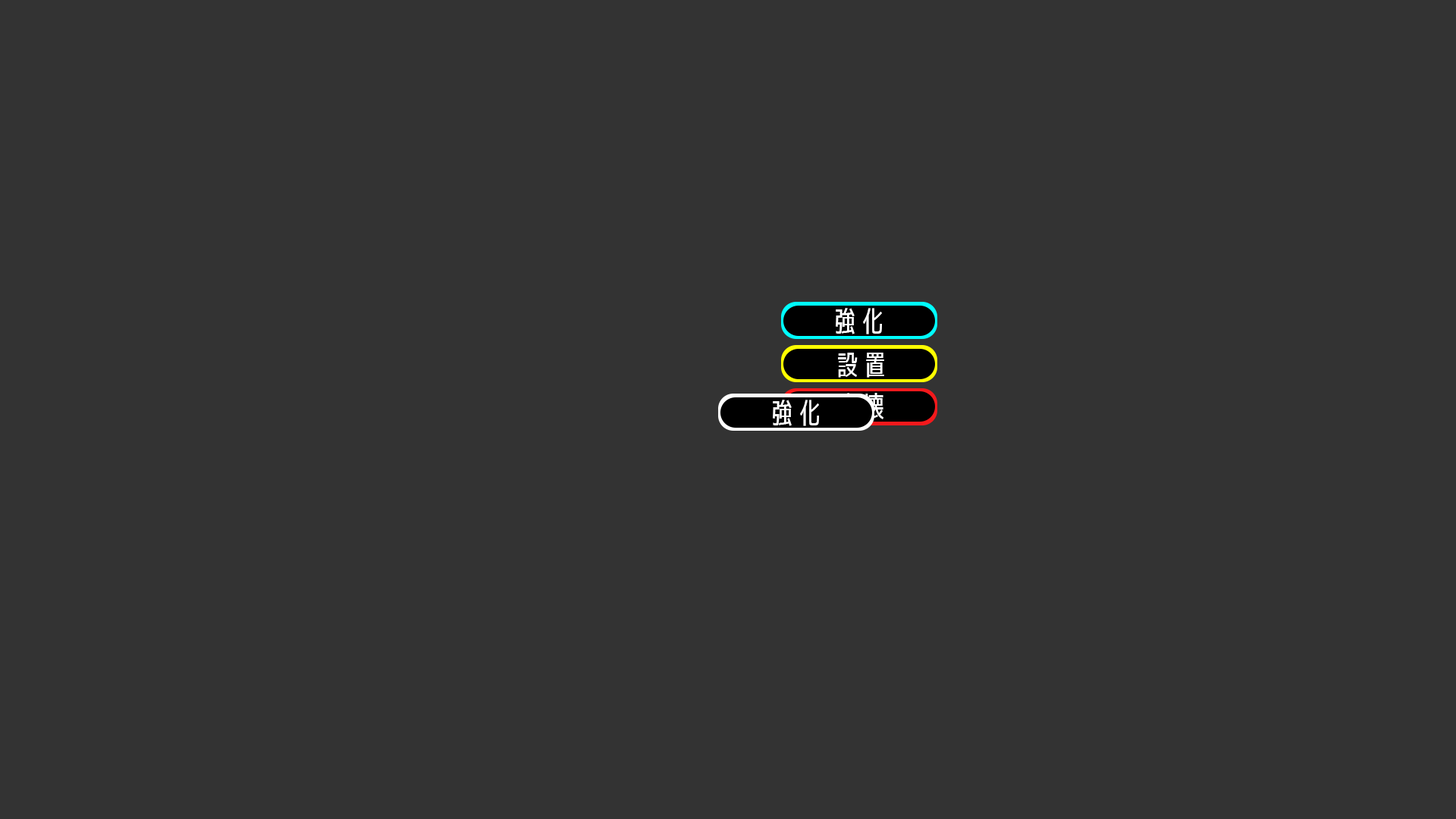
<style>
.page{position:relative;width:1456px;height:819px;background:#333333}
.page>*{position:absolute;margin:0}
.t1{font:28.4px "Senobi-Gothic-Regular";color:#ffffff}
.t2{font:28.4px "Senobi-Gothic-Regular"}
</style>
<div class="page">
<p class="t1" style="left:836px;top:308px;width:46px;height:26px">強化</p>
<p class="t1" style="left:838px;top:353px;width:46px;height:25px">設置</p>
<p class="t1" style="left:773px;top:400px;width:46px;height:26px">強化</p>
<p class="t2" style="left:834px;top:393px;width:49px;height:26px">破壊</p>
</div>
